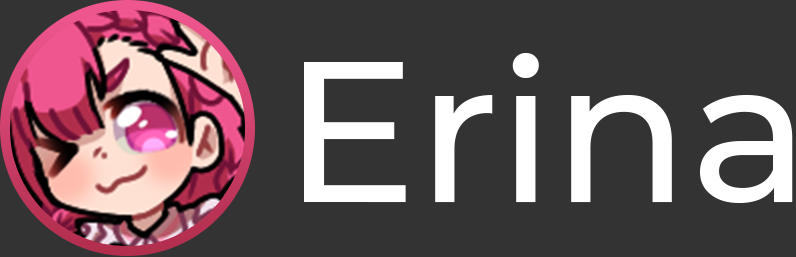
<style>
.page{position:relative;width:796px;height:257px;background:#333333}
.page>*{position:absolute;margin:0}
.t1{font:200px "Montserrat-Medium";color:#ffffff}
</style>
<div class="page">
<p class="t1" style="left:304px;top:53px;width:489px;height:150px">Erina</p>
</div>
